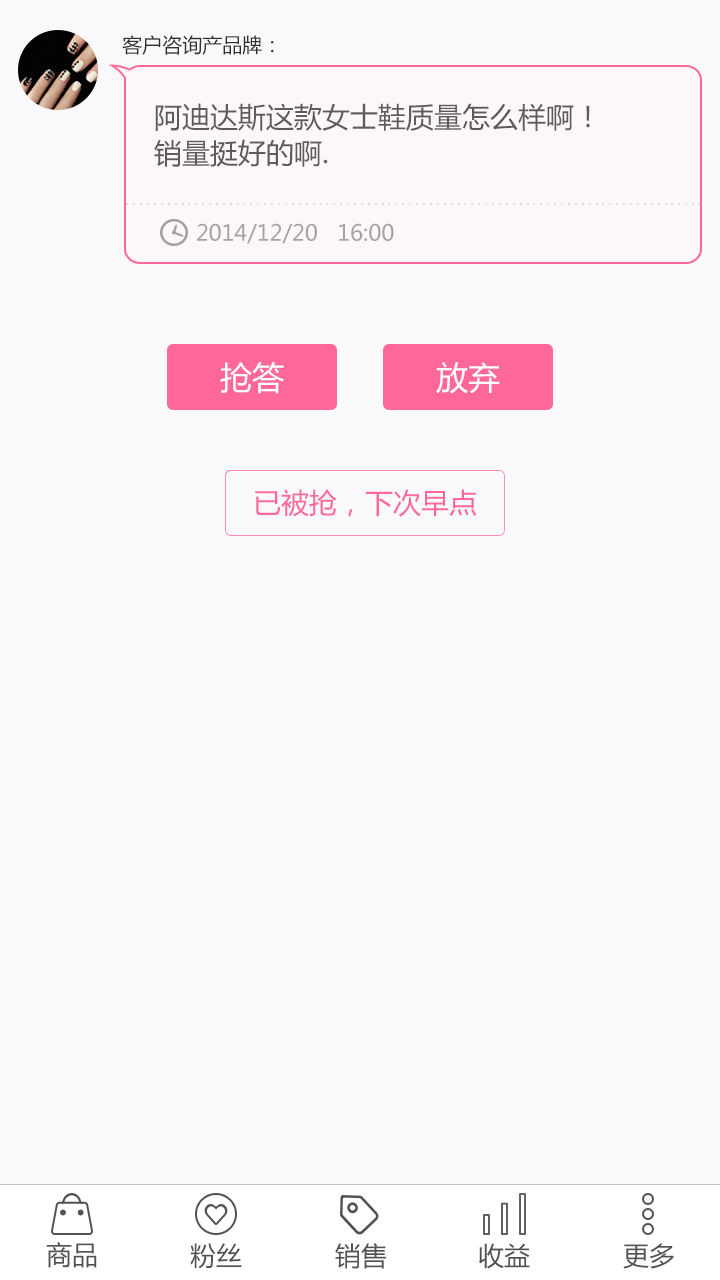
<style>
.page{position:relative;width:720px;height:1280px;background:#f9f8fb}
.page>*{position:absolute;margin:0}
.t1{font:20px "MicrosoftYaHei";color:#303030}
.t2{font:28px/36px "MicrosoftYaHei";color:#5c5c5c}
.t3{font:22px "MicrosoftYaHei";color:#a4a3a3}
.t4{font:32px "MicrosoftYaHei";color:#ffffff}
.t5{font:28px "MicrosoftYaHei";color:#fd679a}
.t6{font:26px "MicrosoftYaHei";color:#525252}
</style>
<div class="page">
<p class="t1" style="left:122px;top:35px;width:152px;height:20px">客户咨询产品牌：</p>
<p class="t2" style="left:154px;top:103px;width:436px;height:64px">阿迪达斯这款女士鞋质量怎么样啊！<br>销量挺好的啊.</p>
<p class="t3" style="left:197px;top:223px;width:197px;height:21px">2014/12/20   16:00</p>
<p class="t4" style="left:220px;top:362px;width:64px;height:32px">抢答</p>
<p class="t4" style="left:436px;top:362px;width:64px;height:32px">放弃</p>
<p class="t5" style="left:255px;top:489px;width:222px;height:28px">已被抢，下次早点</p>
<p class="t6" style="left:46px;top:1242px;width:51px;height:26px">商品</p>
<p class="t6" style="left:190px;top:1243px;width:52px;height:26px">粉丝</p>
<p class="t6" style="left:335px;top:1243px;width:51px;height:26px">销售</p>
<p class="t6" style="left:479px;top:1243px;width:51px;height:26px">收益</p>
<p class="t6" style="left:623px;top:1243px;width:51px;height:26px">更多</p>
</div>
